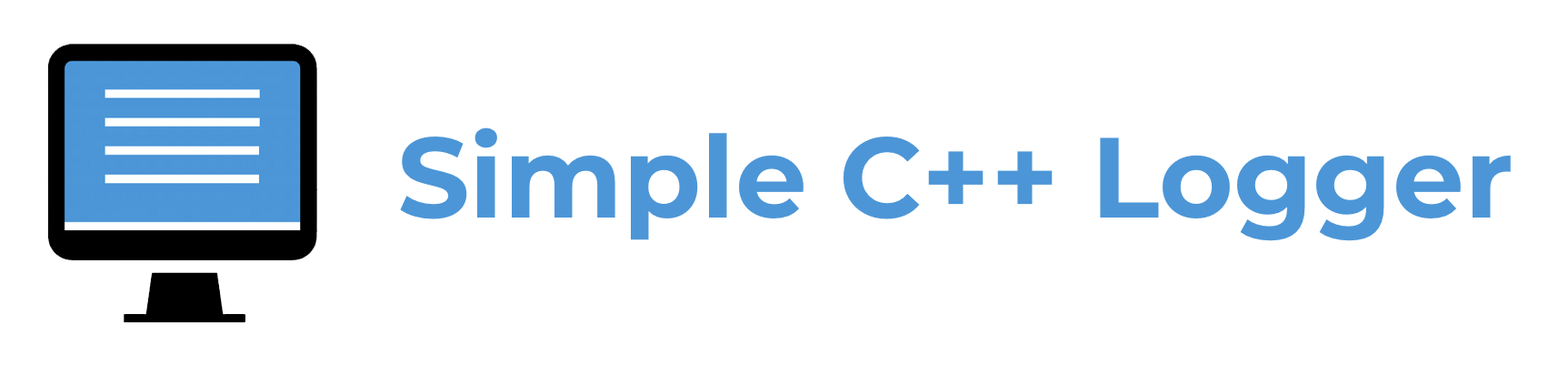
<style>
.page{position:relative;width:1568px;height:375px;background:#ffffff}
.page>*{position:absolute;margin:0}
.t1{font:113.6px "Montserrat-Bold";color:#4c96d7}
</style>
<div class="page">
<p class="t1" style="left:400px;top:127px;width:1111px;height:114px">Simple C++ Logger</p>
</div>
